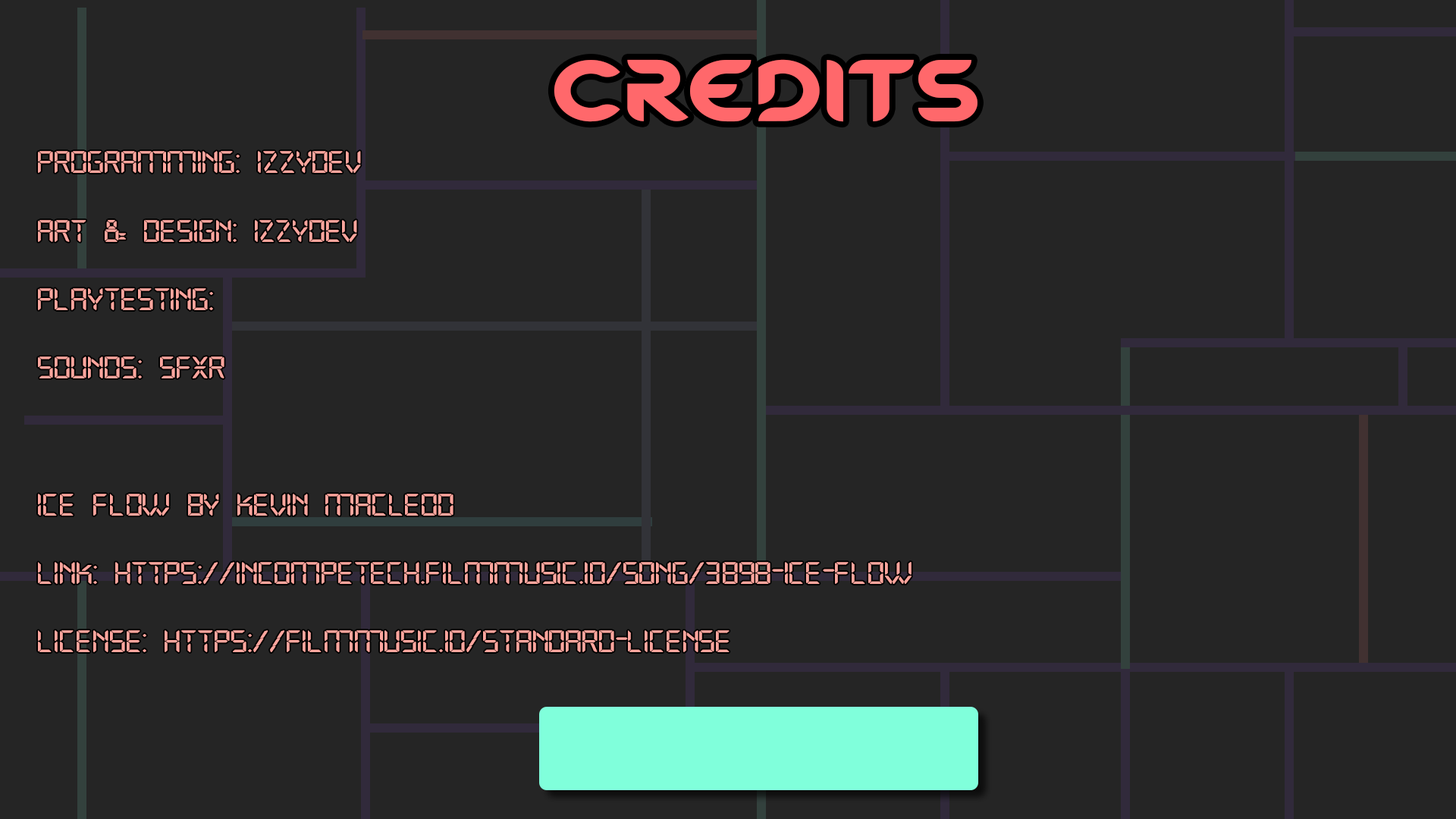
<style>
.page{position:relative;width:1456px;height:819px;background:#252525}
.page>*{position:absolute;margin:0}
.t1{font:84.9px "MagmawaveCaps-Bold";color:#ff686b;scale:1.2 1}
.t2{font:31.4px/68.5px "Open24DisplaySt";color:#ffa69e;scale:1.2 1}
</style>
<div class="page">
<p class="t1" style="left:554px;top:59px;width:423px;height:63px">CREDITS</p>
<p class="t2" style="left:38px;top:151px;width:874px;height:501px">Programming: IzzyDev<br>ART &amp; Design: IzzyDev<br>Playtesting:<br>Sounds: SFXR<br><br>Ice Flow by Kevin MacLeod<br>Link: https://incompetech.filmmusic.io/song/3898-ice-flow<br>License: https://filmmusic.io/standard-license</p>
</div>
